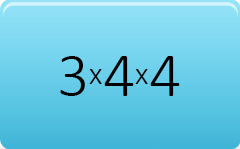
<style>
.page{position:relative;width:240px;height:149px}
.page>*{position:absolute;margin:0}
.t1{font:64px "Calibri-Light";color:#000000}
.t2{font:32px "Calibri-Light";color:#000000}
</style>
<div class="page">
<p class="t1" style="left:60px;top:56px;width:120px;height:40px">3<span class="t2">x</span>4<span class="t2">x</span>4</p>
</div>
